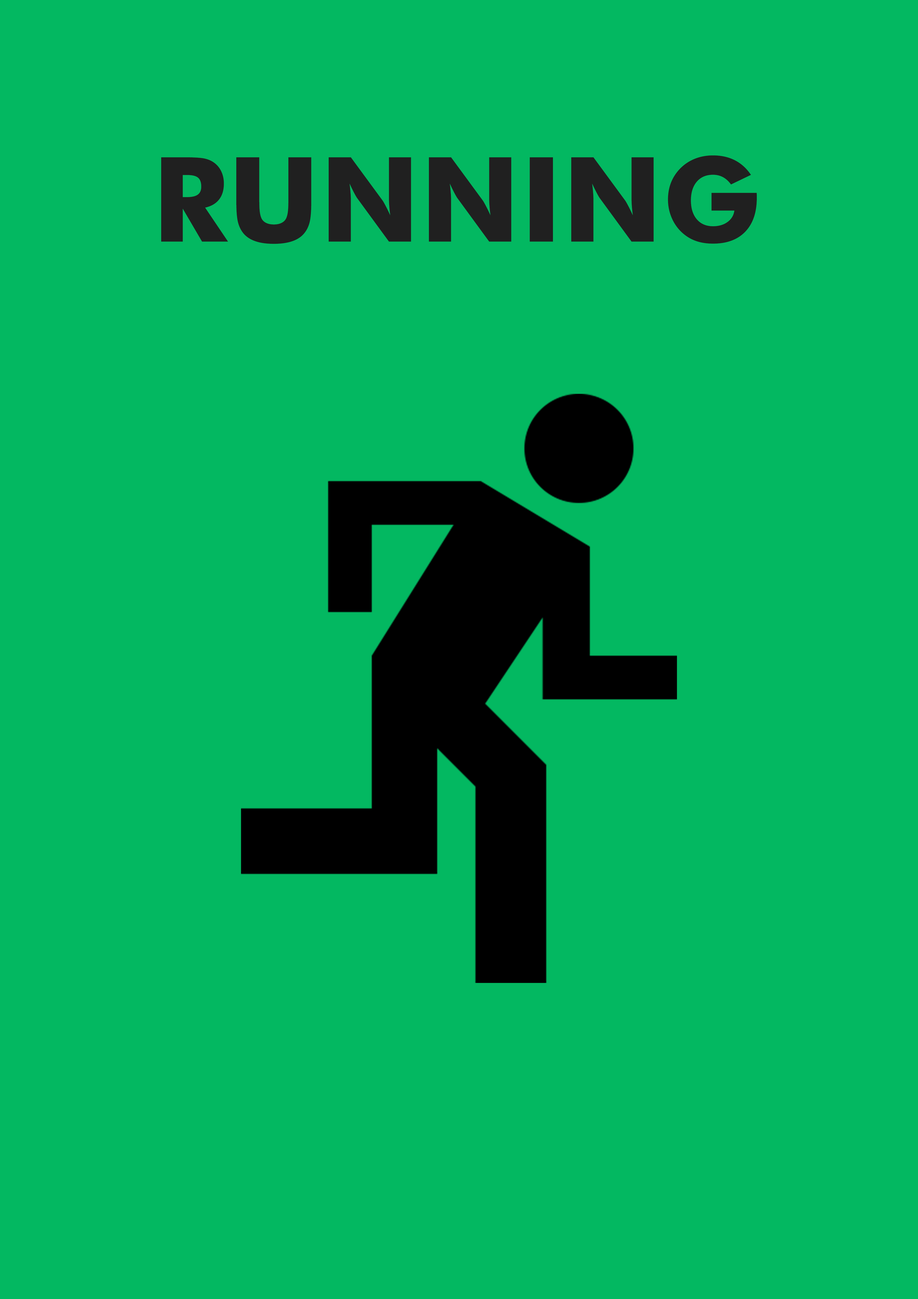
<style>
.page{position:relative;width:918px;height:1299px;background:#03b861}
.page>*{position:absolute;margin:0}
.t1{font:117.8px "FuturaBT-Bold";color:#202020}
</style>
<div class="page">
<p class="t1" style="left:161px;top:155px;width:596px;height:89px">RUNNING</p>
</div>
